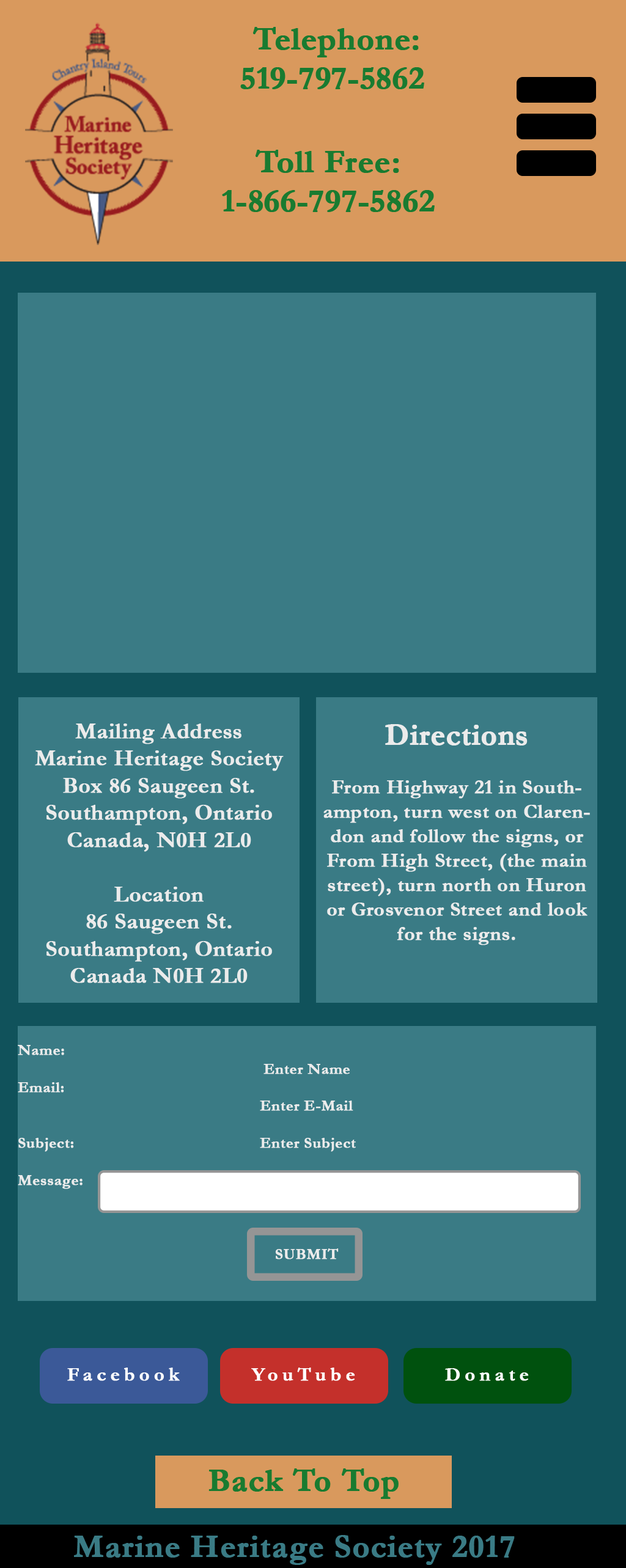
<style>
.page{position:relative;width:626px;height:1568px;background:#3a7b85}
.page>*{position:absolute;margin:0}
.t1{font:32.7px "Garamond-Bold";letter-spacing:-0.01em;color:#197b30;font-weight:bold}
.t2{font:32.7px "Garamond-Bold";color:#197b30;font-weight:bold}
.t3{font:22.7px "Garamond-Bold";color:#ebebeb;font-weight:bold}
.t4{font:15.3px "Garamond-Bold";color:#ebebeb;font-weight:bold}
.t5{font:20.4px "Garamond-Bold";color:#ebebeb;font-weight:bold}
.t6{font:15.5px "Garamond-Bold";color:#ebebeb;font-weight:bold}
.t7{font:30.6px "Garamond-Bold";color:#ebebeb;font-weight:bold}
.t8{font:19.3px "Garamond-Bold";letter-spacing:0.2em;color:#fefefe;font-weight:bold}
.t9{font:19.3px "Garamond-Bold";letter-spacing:0.2em;color:#ffffff;font-weight:bold}
.t10{font:32.7px "Garamond-Bold";color:#3a7b85;font-weight:bold}
</style>
<div class="page">
<p class="t1" style="left:240px;top:27px;width:184px;height:62px;text-align:center"><span class="t2">Telephone:<br></span>519-797-5862</p>
<p class="t1" style="left:222px;top:150px;width:212px;height:62px;text-align:center"><span class="t2">Toll Free:<br></span>1-866-797-5862</p>
<p class="t3" style="left:35px;top:724px;width:249px;height:259px;text-align:center"><span class="t4"><br></span>Mailing Address<br>Marine Heritage Society<br>Box 86 Saugeen St.<br>Southampton, Ontario<br>Canada, N0H 2L0<br><br>Location<br>86 Saugeen St.<br>Southampton, Ontario<br>Canada N0H 2L0</p>
<p class="t5" style="left:323px;top:724px;width:267px;height:221px;text-align:center"><span class="t6"><br></span><span class="t7">Directions<br></span><br>From Highway 21 in Southampton, turn west on Clarendon and follow the signs, or From High Street, (the main street), turn north on Huron or Grosvenor Street and look for the signs.</p>
<p class="t8" style="left:67px;top:1368px;width:113px;height:13px">Facebook</p>
<p class="t9" style="left:251px;top:1368px;width:104px;height:13px">YouTube</p>
<p class="t9" style="left:445px;top:1368px;width:84px;height:13px">Donate</p>
<p class="t2" style="left:208px;top:1468px;width:190px;height:31px">Back To Top</p>
<p class="t10" style="left:74px;top:1535px;width:441px;height:30px">Marine Heritage Society 2017</p>
</div>
